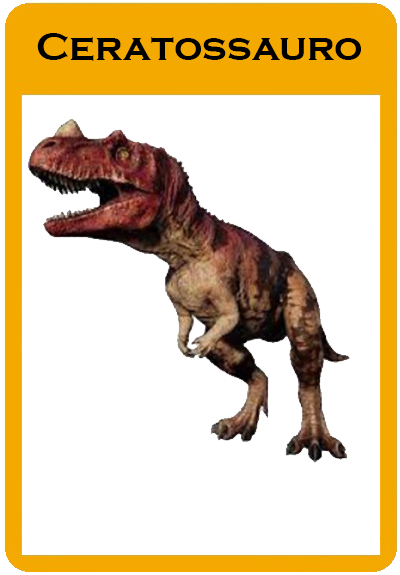
<style>
.page{position:relative;width:400px;height:575px;background:#ffffff}
.page>*{position:absolute;margin:0}
.t1{font:40px "CopperplateGothic-Bold";color:#000000}
</style>
<div class="page">
<p class="t1" style="left:37px;top:33px;width:324px;height:28px">Ceratossauro</p>
</div>
